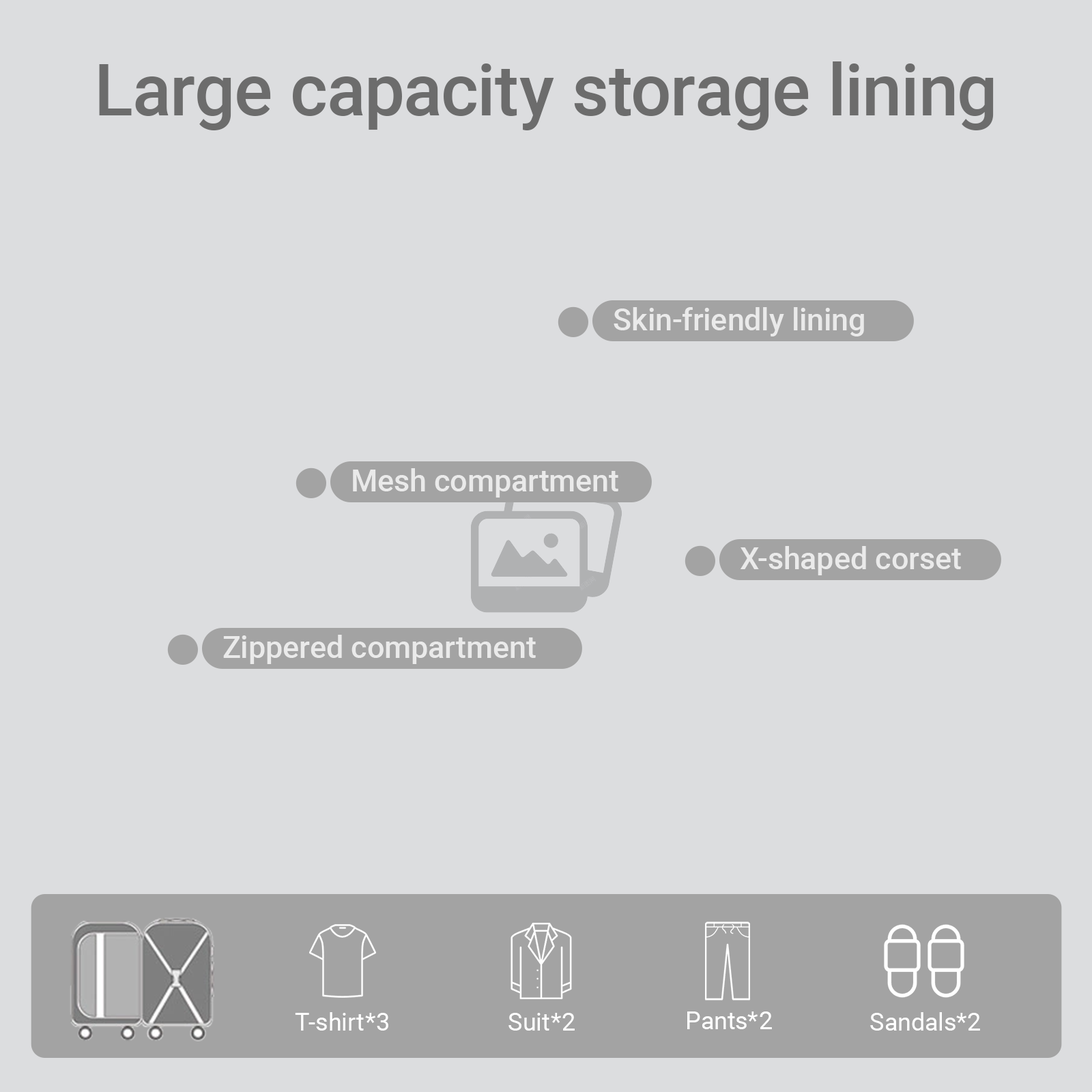
<style>
.page{position:relative;width:1092px;height:1092px;background:#dcdddf}
.page>*{position:absolute;margin:0}
.t1{font:71.3px "Roboto-Medium";color:#6c6c6c}
.t2{font:30.6px "Roboto-Medium";color:#ffffff}
.t3{font:24.6px "Roboto-Regular";color:#ffffff}
</style>
<div class="page">
<p class="t1" style="left:99px;top:61px;width:895px;height:69px">Large capacity storage lining</p>
<p class="t2" style="left:614px;top:307px;width:250px;height:29px;opacity:0.75">Skin-friendly lining</p>
<p class="t2" style="left:353px;top:468px;width:265px;height:30px;opacity:0.75">Mesh compartment</p>
<p class="t2" style="left:740px;top:546px;width:221px;height:29px;opacity:0.75">X-shaped corset</p>
<p class="t2" style="left:223px;top:635px;width:313px;height:29px;opacity:0.75">Zippered compartment</p>
<p class="t3" style="left:295px;top:1012px;width:93px;height:19px">T-shirt*3</p>
<p class="t3" style="left:508px;top:1013px;width:67px;height:18px">Suit*2</p>
<p class="t3" style="left:687px;top:1011px;width:85px;height:18px">Pants*2</p>
<p class="t3" style="left:870px;top:1012px;width:110px;height:19px">Sandals*2</p>
</div>
